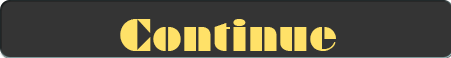
<style>
.page{position:relative;width:451px;height:58px;background:#343434}
.page>*{position:absolute;margin:0}
.t1{font:72.4px "Braggadocio";letter-spacing:0.01em;color:#ffe168;scale:0.91 1}
</style>
<div class="page">
<p class="t1" style="left:120px;top:19px;width:216px;height:32px">Continue</p>
</div>
